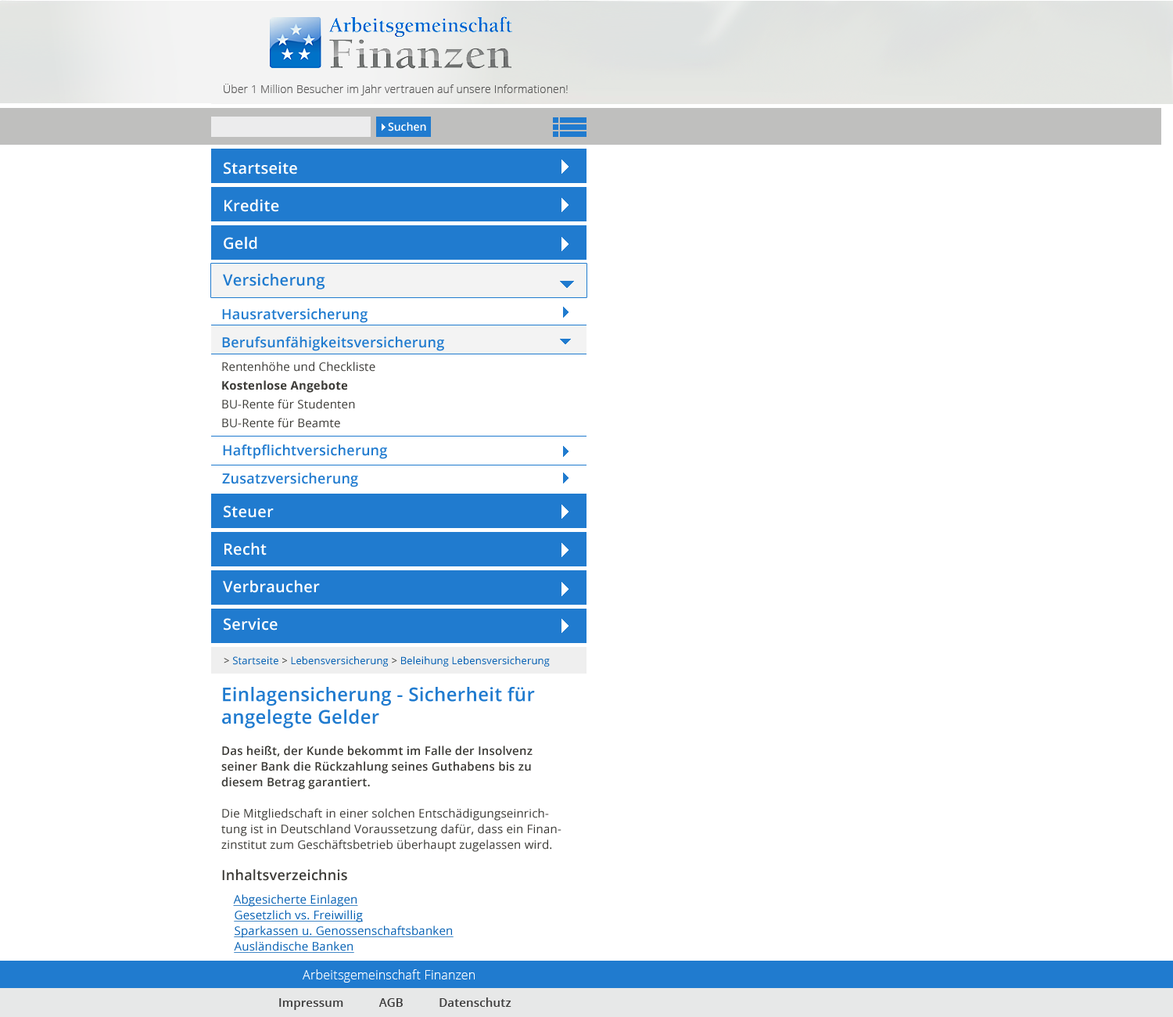
<style>
.page{position:relative;width:1173px;height:1017px;background:#ffffff}
.page>*{position:absolute;margin:0}
.t1{font:10.9px "OpenSans-Light";letter-spacing:0.015em;color:#585858}
.t2{font:10.9px "OpenSans-Semibold";color:#ffffff}
.t3{font:15.6px "OpenSans-Semibold";letter-spacing:0.015em;color:#207bcf}
.t4{font:14.1px/28.2px "OpenSans-Semibold";letter-spacing:0.015em;color:#207bcf}
.t5{font:11.7px/18.8px "OpenSans";letter-spacing:0.015em;color:#3c3b37}
.t6{font:11.7px/18.8px "OpenSans-Bold";letter-spacing:0.015em;color:#3c3b37}
.t7{font:15.6px/37.5px "OpenSans-Semibold";letter-spacing:0.015em;color:#ffffff}
.t8{font:10.2px "OpenSans";letter-spacing:0.015em;color:#0560b3}
.t9{font:10.2px "OpenSans";letter-spacing:0.015em;color:#3c3b37}
.t10{font:11.7px/15.6px "OpenSans";letter-spacing:0.015em;color:#3c3b37}
.t11{font:18.8px "OpenSans-Semibold";letter-spacing:0.015em;color:#207bcf}
.t12{font:11.7px/15.6px "OpenSans-Semibold";letter-spacing:0.015em;color:#3c3b37}
.t13{font:14.1px/15.6px "OpenSans-Semibold";letter-spacing:0.015em;color:#3c3b37}
.t14{font:14.1px/7.8px "OpenSans-Semibold";letter-spacing:0.015em;color:#3c3b37}
.t15{font:11.7px/15.6px "OpenSans";letter-spacing:0.015em;color:#0560b3;text-decoration:underline}
.t16{font:12.5px "OpenSans-Light";letter-spacing:0.015em;color:#ffffff}
.t17{font:11.7px "OpenSans-Semibold";letter-spacing:0.015em;color:#3e3d3d}
</style>
<div class="page">
<p class="t1" style="left:224px;top:84px;width:344px;height:11px">Über 1 Million Besucher im Jahr vertrauen auf unsere Informationen!</p>
<p class="t2" style="left:388px;top:122px;width:38px;height:9px">Suchen</p>
<p class="t3" style="left:223px;top:273px;width:102px;height:16px">Versicherung</p>
<p class="t4" style="left:222px;top:308px;width:222px;height:43px">Hausratversicherung<br>Berufsunfähigkeitsversicherung</p>
<p class="t5" style="left:222px;top:361px;width:153px;height:67px">Rentenhöhe und Checkliste<br><span class="t6">Kostenlose Angebote<br></span>BU-Rente für Studenten<br>BU-Rente für Beamte</p>
<p class="t4" style="left:222px;top:444px;width:165px;height:43px">Haftpflichtversicherung<br>Zusatzversicherung</p>
<p class="t7" style="left:223px;top:505px;width:97px;height:125px">Steuer<br>Recht<br>Verbraucher<br>Service</p>
<p class="t8" style="left:224px;top:656px;width:326px;height:10px"><span class="t9">&gt; </span>Startseite<span class="t9"> &gt; </span>Lebensversicherung<span class="t9"> &gt; </span>Beleihung Lebensversicherung</p>
<p class="t10" style="left:221px;top:687px;width:340px;height:265px"><span class="t11">Einlagensicherung - Sicherheit für angelegte Gelder     <br><br></span><span class="t12">Das heißt, der Kunde bekommt im Falle der Insolvenz seiner Bank die Rückzahlung seines Guthabens bis zu diesem Betrag garantiert.<br></span><br>Die Mitgliedschaft in einer solchen Entschädigungseinrichtung ist in Deutschland Voraussetzung dafür, dass ein Finanzinstitut zum Geschäftsbetrieb überhaupt zugelassen wird.<br><br><span class="t13">Inhaltsverzeichni</span><span class="t14">s<br>  <br>    </span><span class="t15">Abgesicherte Einlagen<br>    Gesetzlich vs. Freiwillig<br>    Sparkassen u. Genossenschaftsbanken<br>    Ausländische Banken</span></p>
<p class="t16" style="left:303px;top:969px;width:172px;height:13px">Arbeitsgemeinschaft Finanzen</p>
<p class="t17" style="left:279px;top:997px;width:232px;height:13px">Impressum           AGB           Datenschutz</p>
</div>
